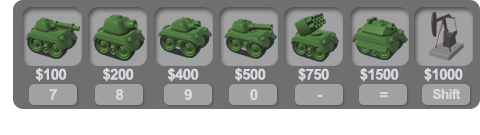
<style>
.page{position:relative;width:480px;height:135px;background:#6f6f6f}
.page>*{position:absolute;margin:0}
.t1{font:14.9px "Arial-BoldMT";letter-spacing:-0.04em;color:#d5d9e0}
.t2{font:13.4px "Arial-BoldMT";letter-spacing:-0.04em;color:#d5d9e0}
</style>
<div class="page">
<p class="t1" style="left:35px;top:68px;width:32px;height:14px">$100</p>
<p class="t1" style="left:102px;top:68px;width:32px;height:14px">$200</p>
<p class="t1" style="left:167px;top:68px;width:32px;height:14px">$400</p>
<p class="t1" style="left:235px;top:68px;width:31px;height:14px">$500</p>
<p class="t1" style="left:298px;top:68px;width:31px;height:14px">$750</p>
<p class="t1" style="left:360px;top:68px;width:39px;height:14px">$1500</p>
<p class="t1" style="left:424px;top:68px;width:39px;height:14px">$1000</p>
<p class="t1" style="left:49px;top:89px;width:8px;height:11px">7</p>
<p class="t1" style="left:116px;top:89px;width:8px;height:12px">8</p>
<p class="t1" style="left:184px;top:89px;width:8px;height:12px">9</p>
<p class="t1" style="left:250px;top:89px;width:8px;height:12px">0</p>
<p class="t2" style="left:433px;top:89px;width:28px;height:10px">Shift</p>
<p class="t1" style="left:317px;top:94px;width:5px;height:3px">-</p>
<p class="t1" style="left:380px;top:92px;width:8px;height:6px">=</p>
</div>
